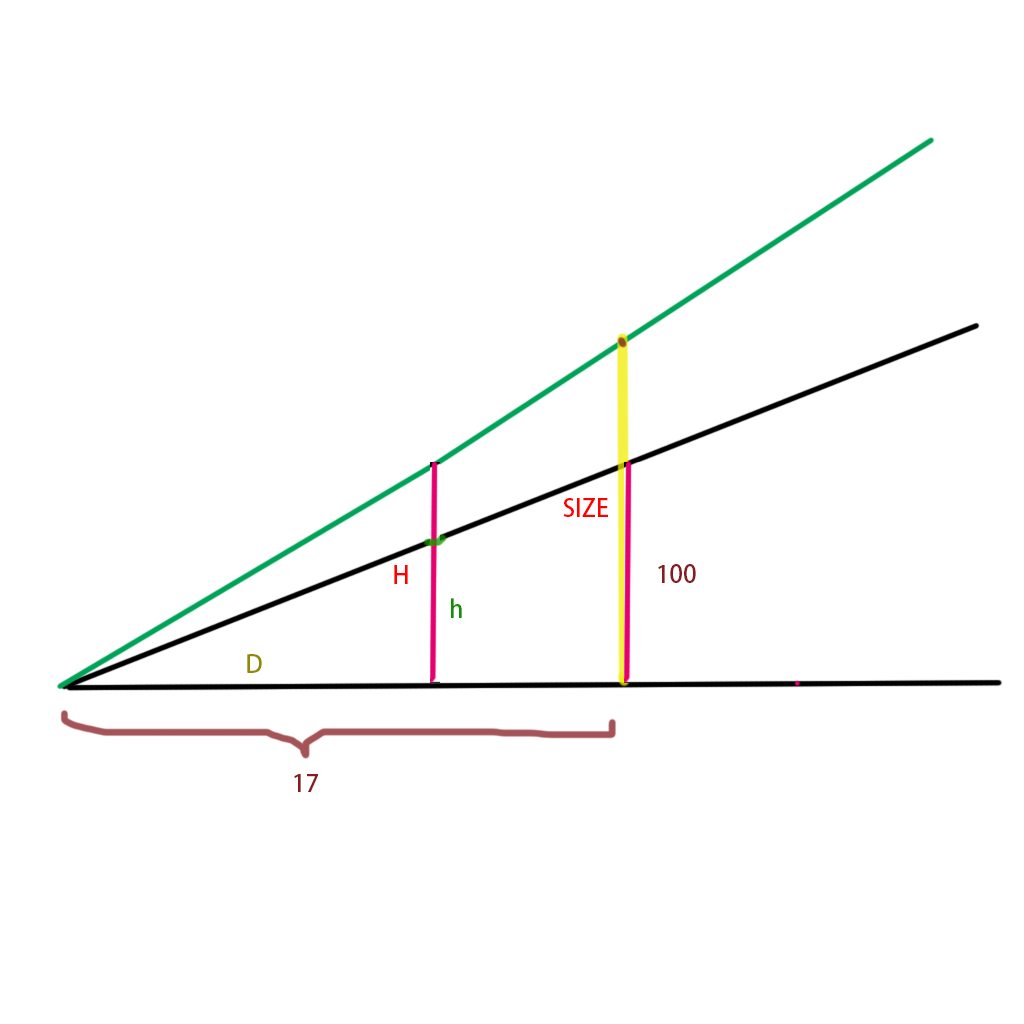
<style>
.page{position:relative;width:1024px;height:1024px;background:#ffffff}
.page>*{position:absolute;margin:0}
.t1{font:12px "AdobeHeitiStd-Regular";color:#ff0000}
.t2{font:12px "AdobeHeitiStd-Regular";color:#861b20}
.t3{font:12px "AdobeHeitiStd-Regular";color:#119100}
.t4{font:12px "AdobeHeitiStd-Regular";color:#918a00}
</style>
<div class="page">
<p class="t1" style="left:563px;top:498px;width:45px;height:19px">SIZE</p>
<p class="t1" style="left:394px;top:565px;width:14px;height:19px">H</p>
<p class="t2" style="left:658px;top:564px;width:38px;height:19px">100</p>
<p class="t3" style="left:451px;top:598px;width:11px;height:20px">h</p>
<p class="t4" style="left:247px;top:654px;width:15px;height:19px">D</p>
<p class="t2" style="left:294px;top:774px;width:24px;height:18px">17</p>
</div>
